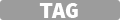
<style>
.page{position:relative;width:120px;height:20px;background:#9c9c9c}
.page>*{position:absolute;margin:0}
.t1{font:23px "SourceCodePro-Black";color:#ffffff;text-transform:uppercase}
</style>
<div class="page">
<p class="t1" style="left:39px;top:3px;width:39px;height:15px">Tag</p>
</div>
